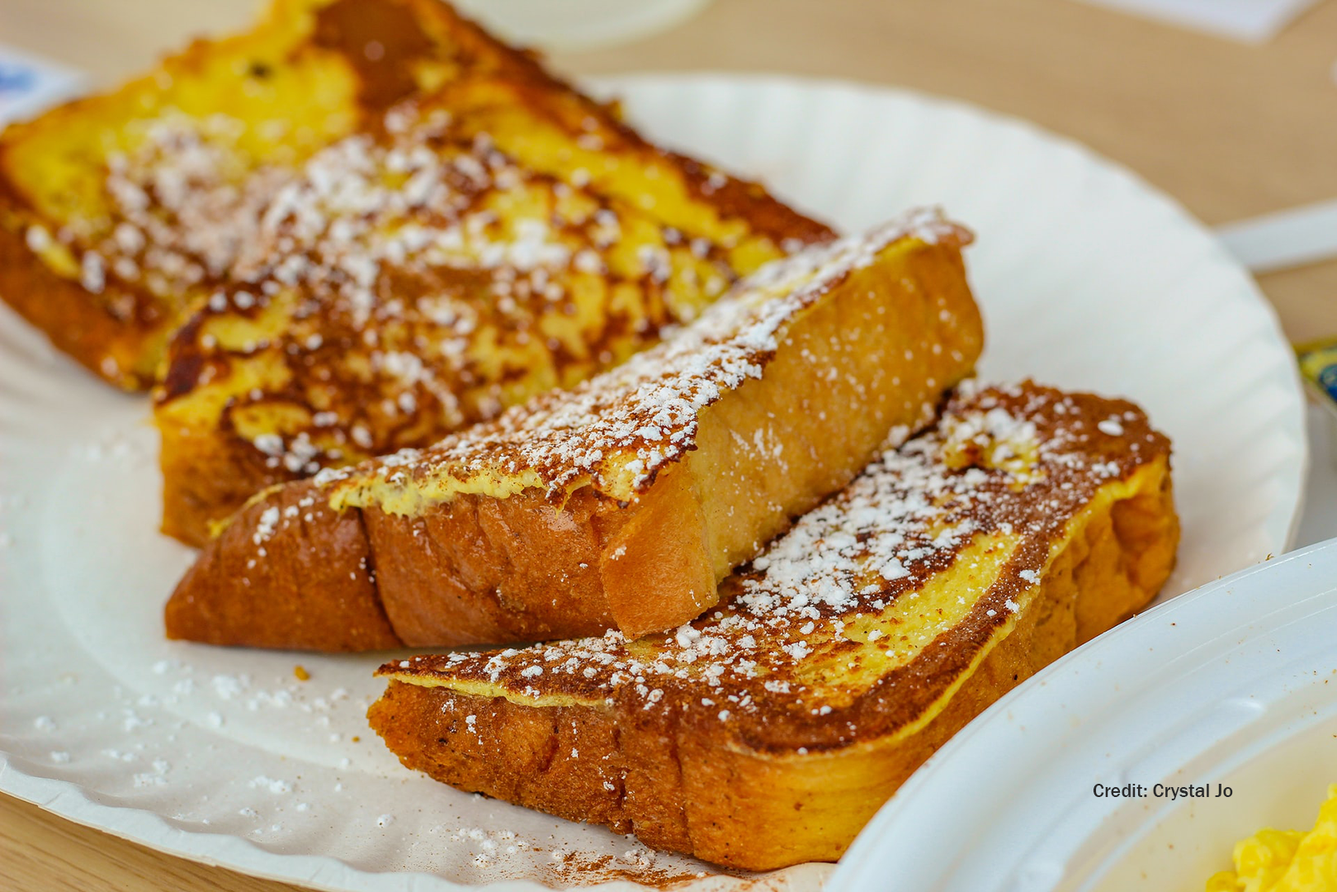
<style>
.page{position:relative;width:1337px;height:892px}
.page>*{position:absolute;margin:0}
.t1{font:19.8px "FranklinGothic-Medium";color:#292929}
</style>
<div class="page">
<p class="t1" style="left:1093px;top:783px;width:140px;height:17px">Credit: Crystal Jo</p>
</div>
